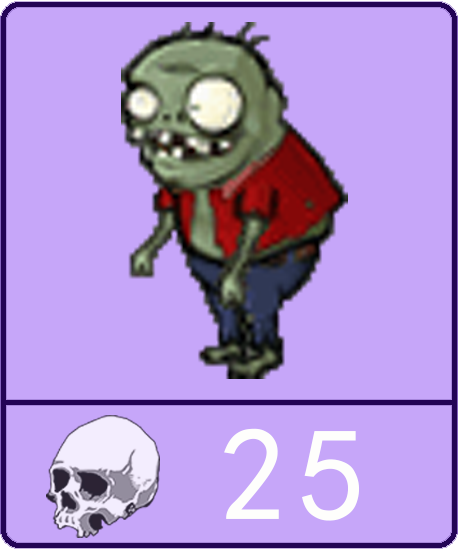
<style>
.page{position:relative;width:458px;height:550px;background:#c6a6f9}
.page>*{position:absolute;margin:0}
.t1{font:133.3px "SimHei";letter-spacing:0.1em;color:#fefefc}
</style>
<div class="page">
<p class="t1" style="left:224px;top:428px;width:136px;height:93px">25</p>
</div>
